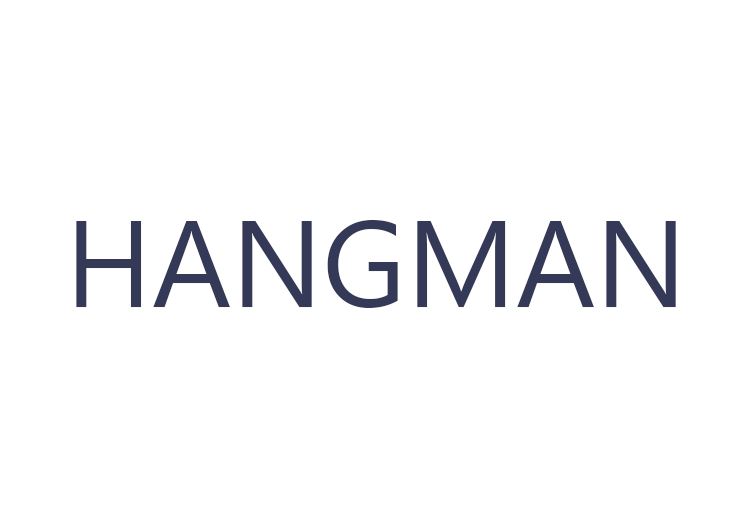
<style>
.page{position:relative;width:748px;height:529px;background:#ffffff}
.page>*{position:absolute;margin:0}
.t1{font:122.5px "SegoeUI";color:#343957}
</style>
<div class="page">
<p class="t1" style="left:76px;top:220px;width:600px;height:88px">HANGMAN</p>
</div>
